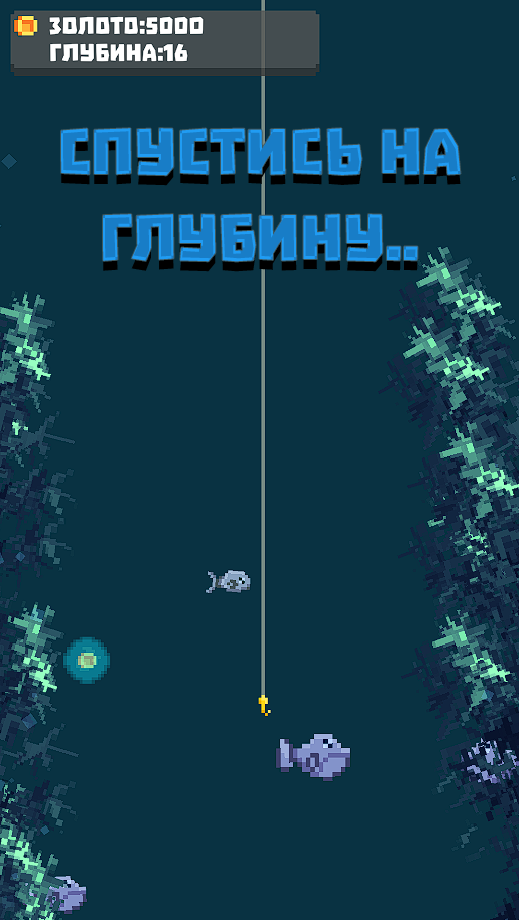
<style>
.page{position:relative;width:519px;height:920px;background:#093242}
.page>*{position:absolute;margin:0}
.t1{font:72px "Troika"}
</style>
<div class="page">
<p class="t1" style="left:61px;top:128px;width:400px;height:134px;text-align:center">спустись на<br>глубину..</p>
</div>
